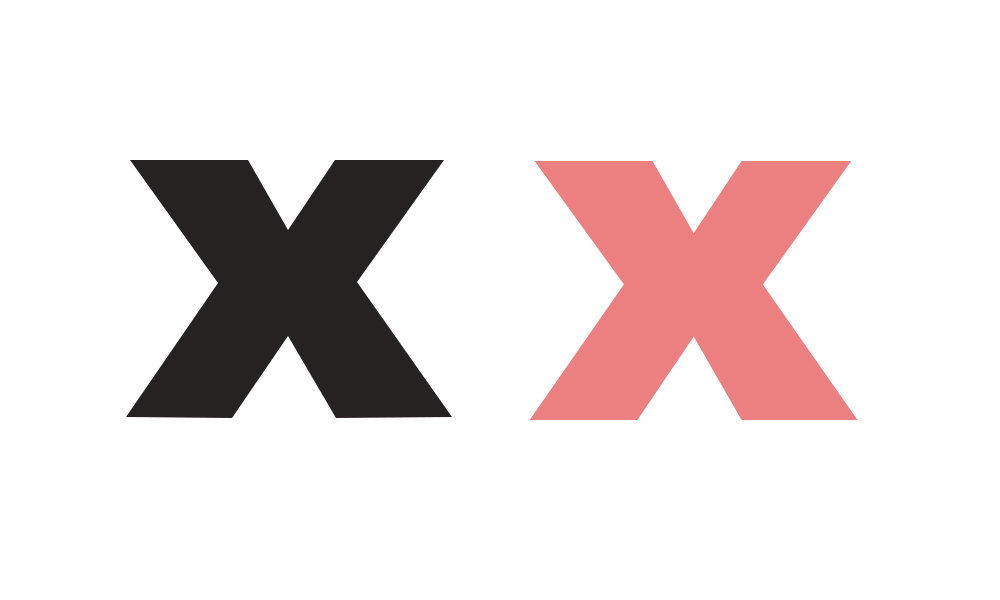
<style>
.page{position:relative;width:1000px;height:600px;background:#ffffff}
.page>*{position:absolute;margin:0}
.t1{font:500px "Arial-Black";color:#ec7f7f}
</style>
<div class="page">
<p class="t1" style="left:529px;top:161px;width:329px;height:259px">x</p>
</div>
